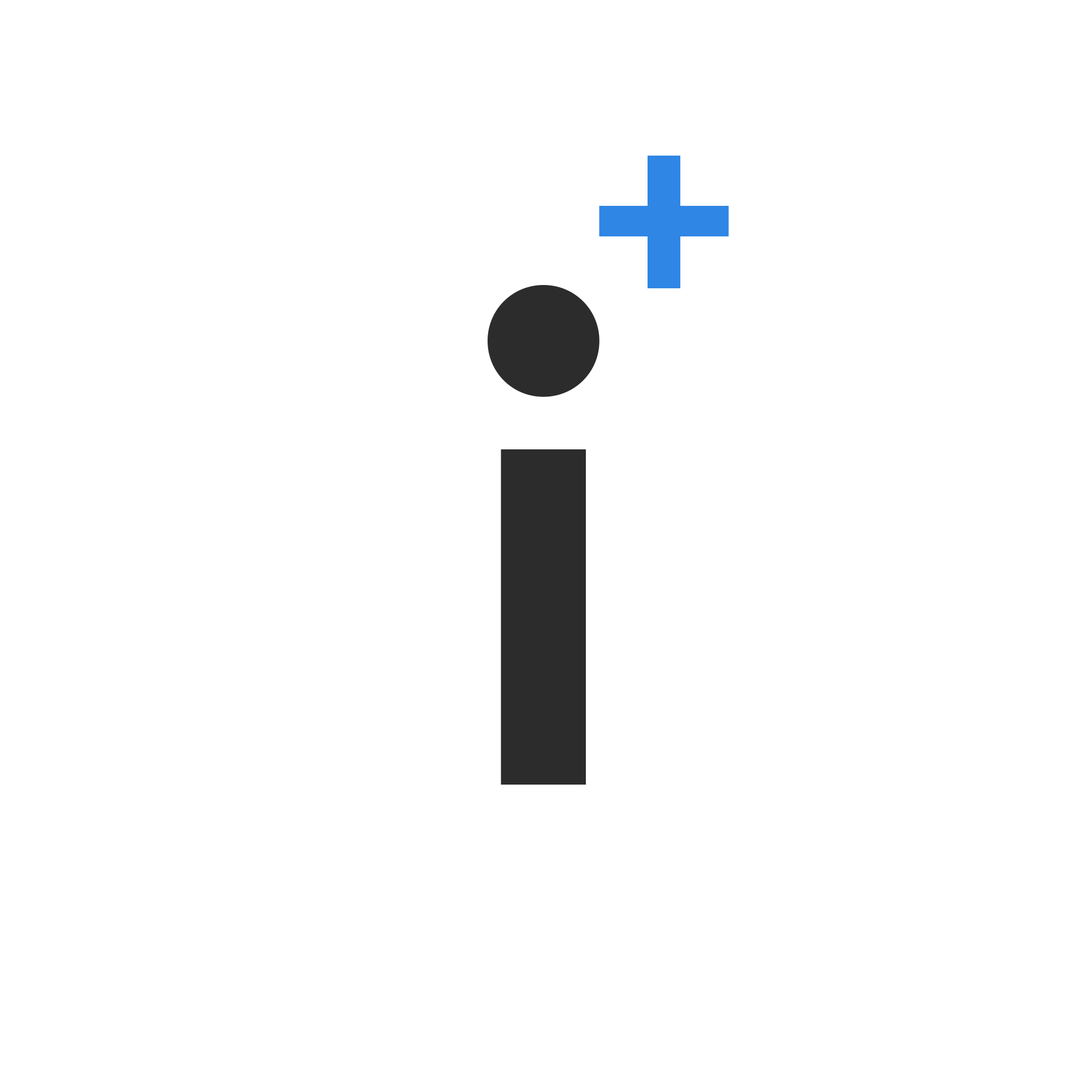
<style>
.page{position:relative;width:1092px;height:1092px;background:#ffffff}
.page>*{position:absolute;margin:0}
.t1{font:273px "Europa-Bold";color:#2f86e5}
.t2{font:707.6px "Europa-Bold";color:#2c2c2c}
</style>
<div class="page">
<p class="t1" style="left:599px;top:156px;width:130px;height:132px">+</p>
<p class="t2" style="left:488px;top:285px;width:112px;height:500px">i</p>
</div>
